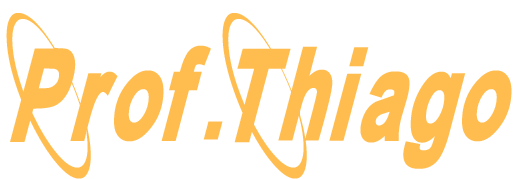
<style>
.page{position:relative;width:521px;height:179px;background:#ffffff}
.page>*{position:absolute;margin:0}
.t1{font:153.8px "13Misa";color:#ffbd50;scale:0.51 1}
</style>
<div class="page">
<p class="t1" style="left:6px;top:13px;width:506px;height:166px">Prof.Thiago</p>
</div>
